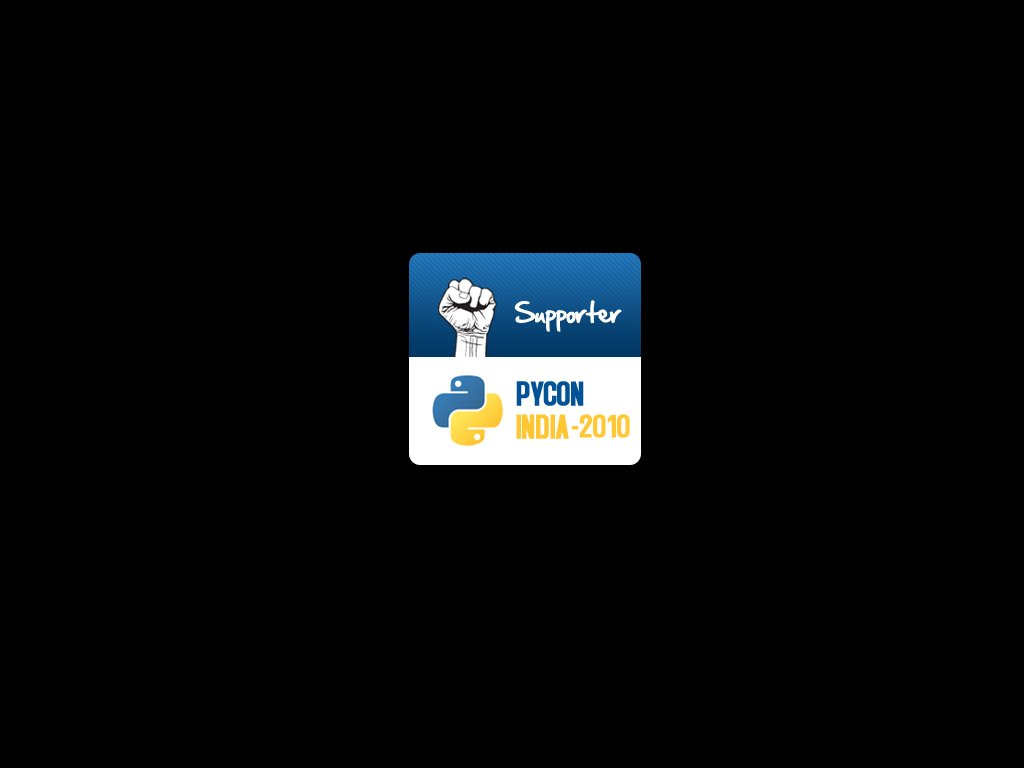
<style>
.page{position:relative;width:1024px;height:768px;background:#000000}
.page>*{position:absolute;margin:0}
.t1{font:24px "HandOfSean";letter-spacing:-0.025em;color:#ffffff}
.t2{font:36px "AccidentalPresidency";letter-spacing:-0.025em;color:#025296;text-transform:uppercase;font-weight:bold}
.t3{font:36px "AccidentalPresidency";letter-spacing:-0.025em;color:#ffc634;text-transform:uppercase;font-weight:bold}
.t4{font:36px "AccidentalPresidency";letter-spacing:-0.025em;color:#ffc837;text-transform:uppercase;font-weight:bold}
</style>
<div class="page">
<p class="t1" style="left:514px;top:300px;width:108px;height:32px">Supporter</p>
<p class="t2" style="left:516px;top:381px;width:68px;height:25px">pycon</p>
<p class="t3" style="left:516px;top:414px;width:53px;height:25px">india</p>
<p class="t4" style="left:572px;top:414px;width:58px;height:24px">-2010</p>
</div>
